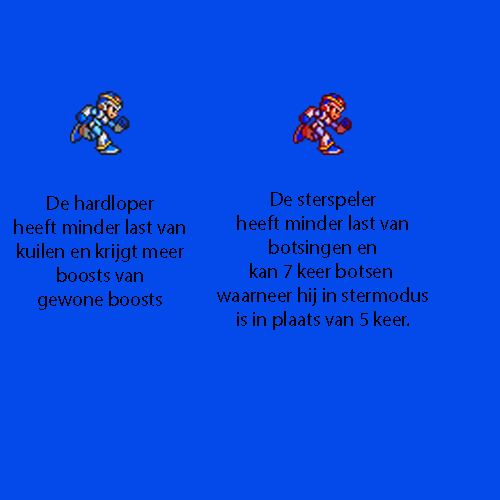
<style>
.page{position:relative;width:500px;height:500px;background:#0449ea}
.page>*{position:absolute;margin:0}
.t1{font:20px "MyriadPro-Regular";color:#000000}
</style>
<div class="page">
<p class="t1" style="left:14px;top:195px;width:171px;height:115px;text-align:center">De hardloper<br>heeft minder last van<br>kuilen en krijgt meer<br>boosts van<br>gewone boosts</p>
<p class="t1" style="left:217px;top:191px;width:211px;height:139px;text-align:center">De sterspeler<br>heeft minder last van<br>botsingen en<br>kan 7 keer botsen <br>waarneer hij in stermodus<br>is in plaats van 5 keer.</p>
</div>
